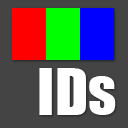
<style>
.page{position:relative;width:128px;height:128px;background:#444444}
.page>*{position:absolute;margin:0}
.t1{font:60px "Impact";color:#ffffff}
</style>
<div class="page">
<p class="t1" style="left:39px;top:68px;width:77px;height:47px">IDs</p>
</div>
